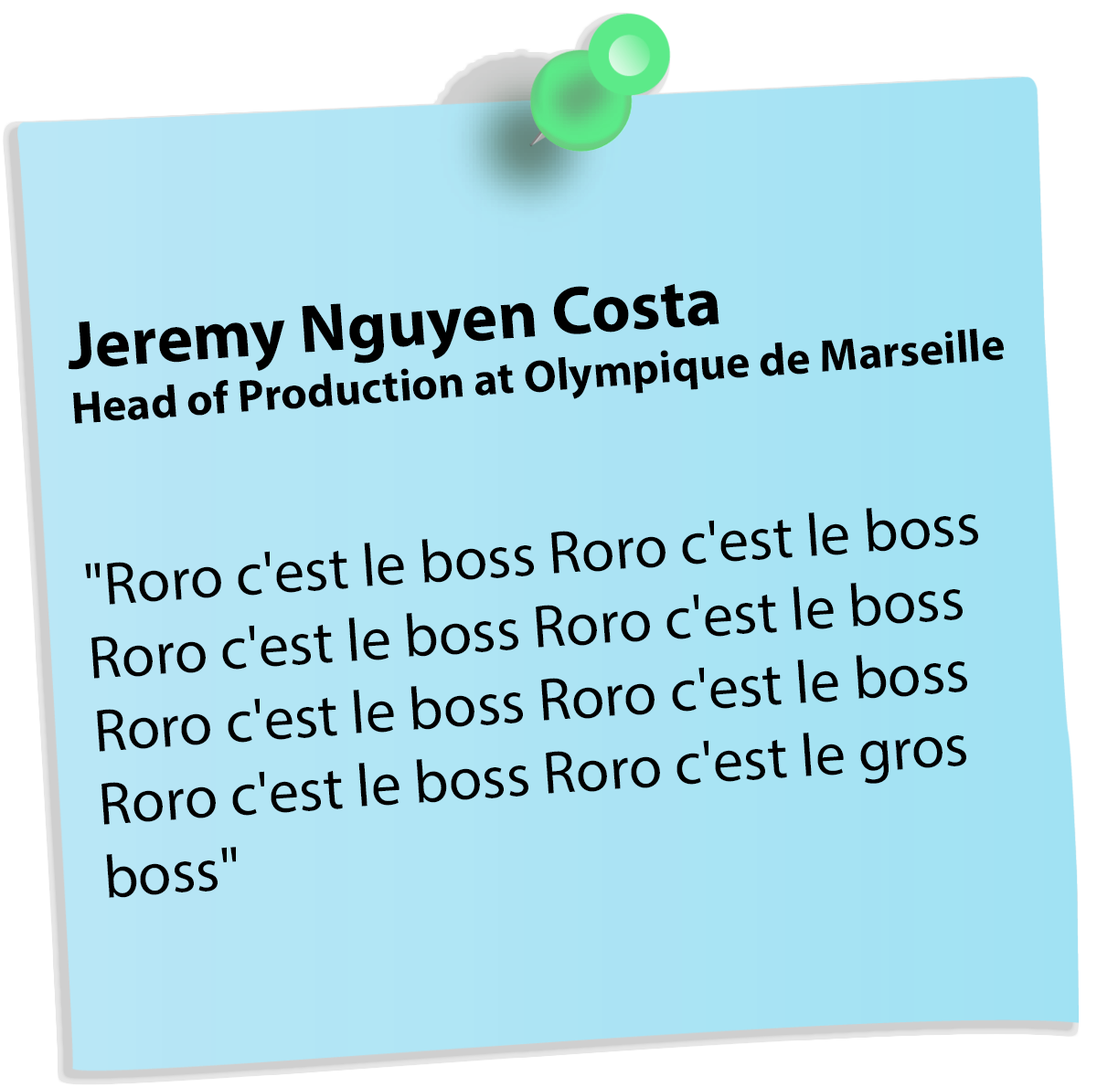
<style>
.page{position:relative;width:1097px;height:1087px}
.page>*{position:absolute;margin:0}
.t1{font:60.9px "MyriadPro-Regular";color:#000000}
.t2{font:68.5px "MyriadPro-Bold";color:#000000}
.t3{font:45.7px "MyriadPro-Bold";color:#000000}
</style>
<div class="page">
<p class="t1" style="left:69px;top:283px;width:934px;height:615px;rotate:-4deg"><span class="t2">Jeremy Nguyen Costa<br></span><span class="t3">Head of Production at Olympique de Marseille<br><br><br></span>"Roro c'est le boss Roro c'est le boss<br>Roro c'est le boss Roro c'est le boss<br>Roro c'est le boss Roro c'est le boss<br>Roro c'est le boss Roro c'est le gros<br>boss"</p>
</div>
